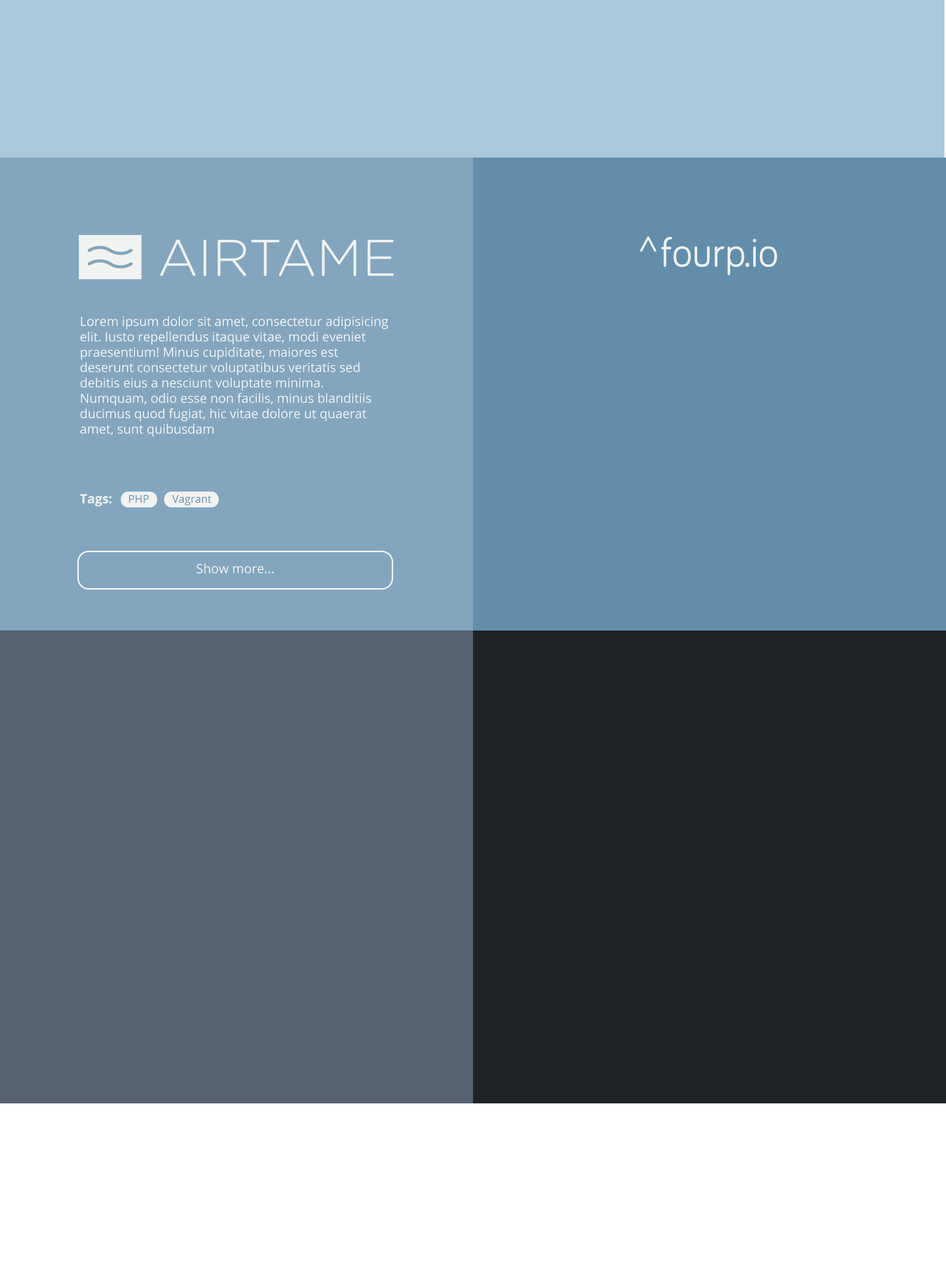
<style>
.page{position:relative;width:946px;height:1261px}
.page>*{position:absolute;margin:0}
.t1{font:12.8px "OpenSans";color:#f1f2f2}
.t2{font:12.8px "OpenSans-Bold";color:#f1f2f2}
.t3{font:10.8px "OpenSans";color:#628eac}
</style>
<div class="page">
<p class="t1" style="left:80px;top:316px;width:308px;height:121px">Lorem ipsum dolor sit amet, consectetur adipisicing elit. Iusto repellendus itaque vitae, modi eveniet praesentium! Minus cupiditate, maiores est deserunt consectetur voluptatibus veritatis sed debitis eius a nesciunt voluptate minima. Numquam, odio esse non facilis, minus blanditiis ducimus quod fugiat, hic vitae dolore ut quaerat amet, sunt quibusdam</p>
<p class="t2" style="left:80px;top:494px;width:32px;height:12px"><span class="t1"><br></span>Tags:</p>
<p class="t3" style="left:129px;top:495px;width:20px;height:8px">PHP</p>
<p class="t3" style="left:172px;top:495px;width:39px;height:10px">Vagrant</p>
<p class="t1" style="left:197px;top:563px;width:76px;height:10px">Show more...</p>
</div>
